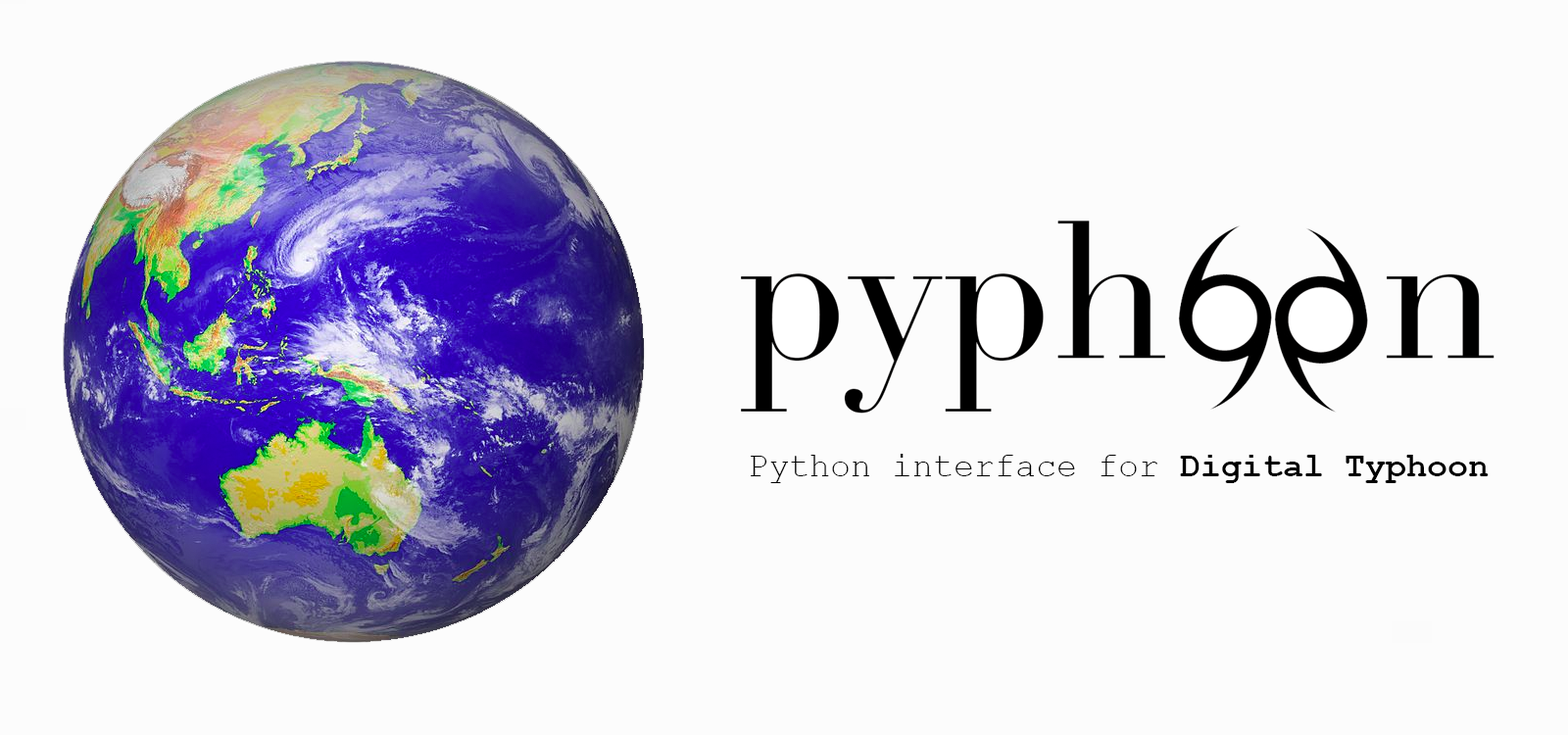
<style>
.page{position:relative;width:1568px;height:735px;background:#fcfcfc}
.page>*{position:absolute;margin:0}
.t1{font:34.3px "CourierNewPSMT";color:#000000}
.t2{font:34.3px "CourierNewPS-BoldMT";color:#000000}
</style>
<div class="page">
<p class="t1" style="left:751px;top:454px;width:738px;height:29px">Python interface for <span class="t2">Digital Typhoon</span></p>
</div>
